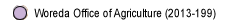
<style>
.page{position:relative;width:250px;height:25px;background:#ffffff}
.page>*{position:absolute;margin:0}
.t1{font:11.8px "ArialMT";letter-spacing:-0.005em;color:#020202;scale:0.85 1}
</style>
<div class="page">
<p class="t1" style="left:34px;top:8px;width:182px;height:12px">Woreda Office of Agriculture (2013-199)</p>
</div>
